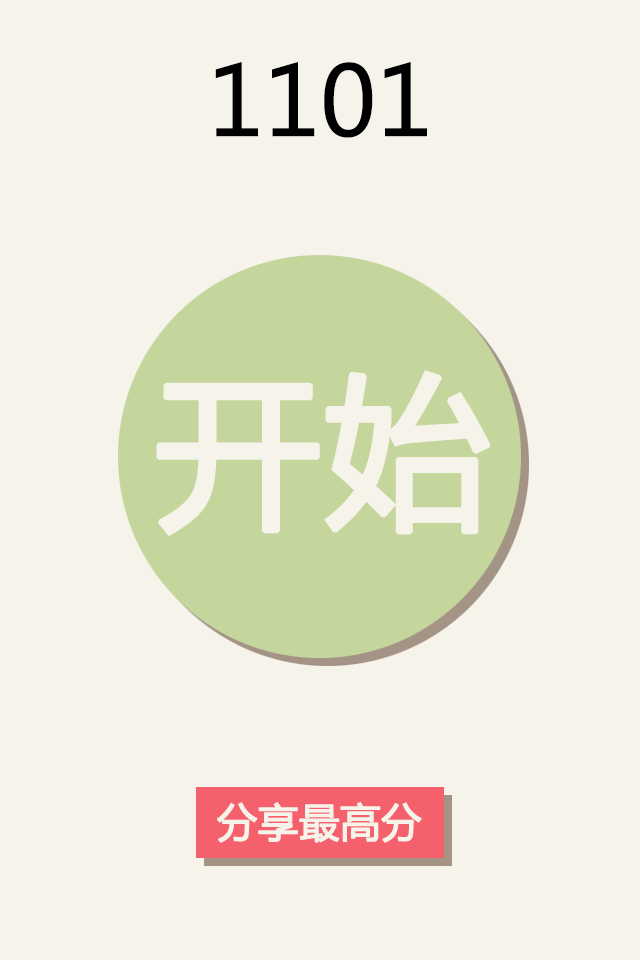
<style>
.page{position:relative;width:640px;height:960px;background:#f6f3eb}
.page>*{position:absolute;margin:0}
.t1{font:96px "MicrosoftYaHei";color:#000000}
.t2{font:165px "MicrosoftYaHei";color:#f6f3eb;font-weight:bold}
.t3{font:40px "MicrosoftYaHei";color:#f6f3eb;font-weight:bold}
</style>
<div class="page">
<p class="t1" style="left:215px;top:62px;width:212px;height:76px">1101</p>
<p class="t2" style="left:156px;top:370px;width:335px;height:167px">开始</p>
<p class="t3" style="left:217px;top:802px;width:205px;height:41px">分享最高分</p>
</div>
